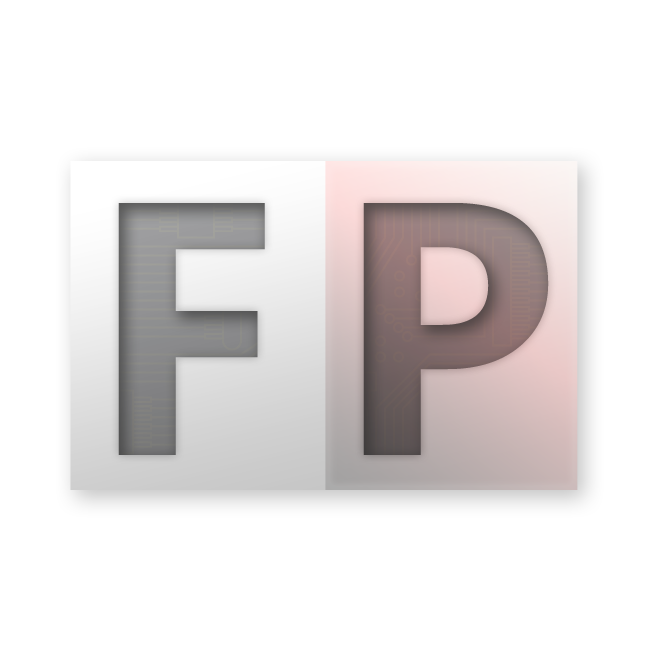
<style>
.page{position:relative;width:650px;height:650px;background:#ffffff}
.page>*{position:absolute;margin:0}
.t1{font:360px "SegoeUI-Bold";letter-spacing:0.16em}
</style>
<div class="page">
<p class="t1" style="left:118px;top:203px;width:431px;height:252px">FP</p>
</div>
